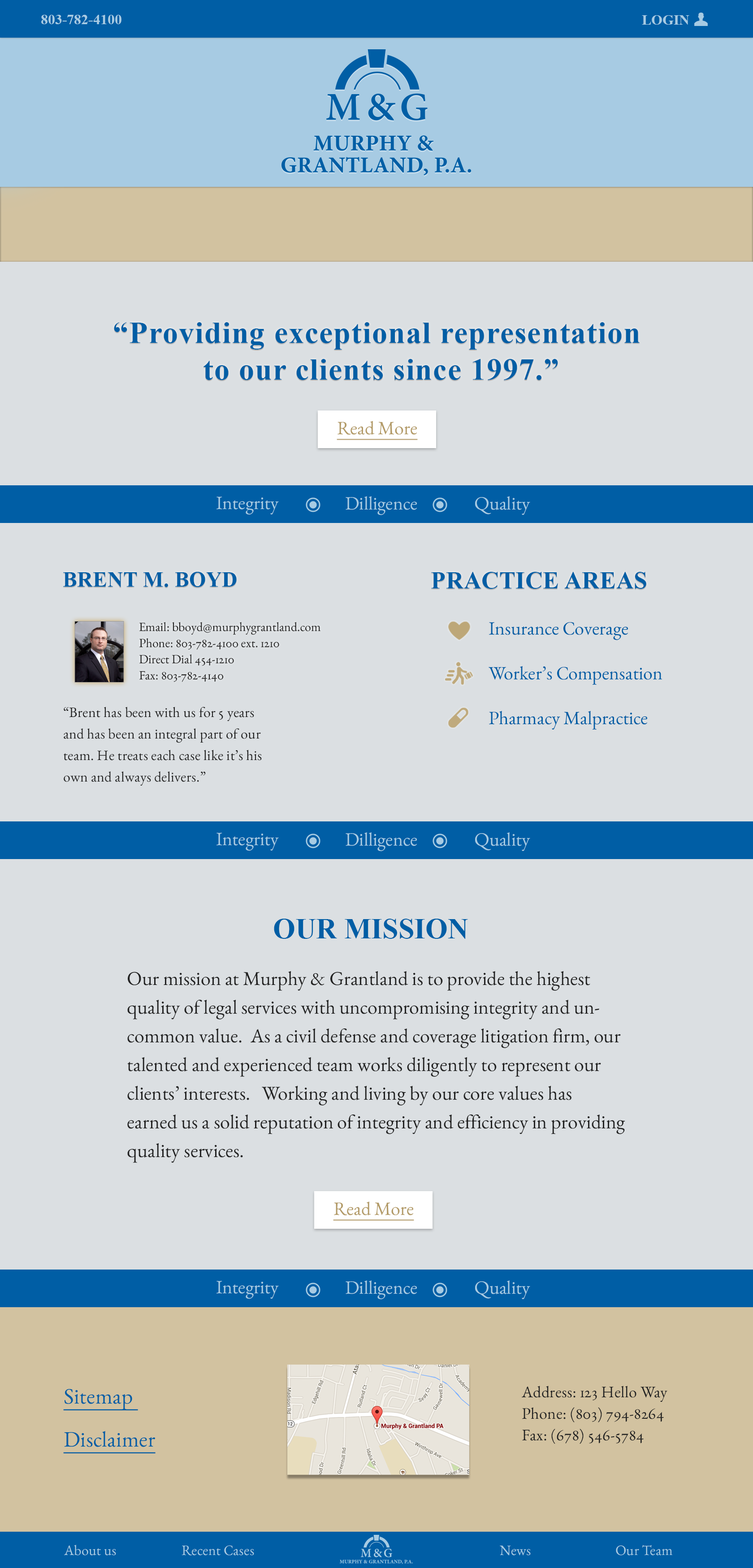
<style>
.page{position:relative;width:753px;height:1568px;background:#dbdfe2}
.page>*{position:absolute;margin:0}
.t1{font:14.3px "TimesNewRomanPS-BoldMT";color:#a7cbe3}
.t2{font:30.5px "TimesNewRomanPS-BoldMT";letter-spacing:0.03em;color:#005ea5}
.t3{font:18.8px "EBGaramond";color:#b39b68;text-decoration:underline}
.t4{font:18.8px "EBGaramond";color:#a7cbe3}
.t5{font:21.5px "TimesNewRomanPS-BoldMT";letter-spacing:0.01em;color:#005ea5}
.t6{font:24.2px "TimesNewRomanPS-BoldMT";letter-spacing:0.01em;color:#005ea5}
.t7{font:12.5px/16.1px "EBGaramond";color:#222222}
.t8{font:18.8px "EBGaramond";color:#005ea5}
.t9{font:14.3px/21.5px "EBGaramond";letter-spacing:0.01em;color:#222222}
.t10{font:28.7px "TimesNewRomanPS-BoldMT";color:#005ea5}
.t11{font:19.7px/28.7px "EBGaramond";color:#222222}
.t12{font:16.1px/21.5px "EBGaramond";letter-spacing:0.01em;color:#222222}
.t13{font:22px/21.5px "EBGaramond";letter-spacing:0.01em;color:#005ea5;text-decoration:underline}
.t14{font:14.3px "EBGaramond";letter-spacing:0.01em;color:#a7cbe3}
</style>
<div class="page">
<p class="t1" style="left:41px;top:15px;width:80px;height:9px">803-782-4100</p>
<p class="t1" style="left:642px;top:15px;width:47px;height:10px">LOGIN</p>
<p class="t2" style="left:114px;top:322px;width:525px;height:58px;text-align:center">“Providing exceptional representation <br>to our clients since 1997.”</p>
<p class="t3" style="left:337px;top:421px;width:81px;height:19px">Read More</p>
<p class="t4" style="left:216px;top:497px;width:63px;height:18px">Integrity</p>
<p class="t4" style="left:346px;top:496px;width:71px;height:19px">Dilligence</p>
<p class="t4" style="left:475px;top:496px;width:55px;height:19px">Quality</p>
<p class="t5" style="left:63px;top:572px;width:174px;height:15px">BRENT M. BOYD</p>
<p class="t6" style="left:431px;top:572px;width:215px;height:17px">PRACTICE AREAS</p>
<p class="t7" style="left:139px;top:622px;width:182px;height:60px">Email: bboyd@murphygrantland.com <br>Phone: 803-782-4100 ext. 1210<br>Direct Dial 454-1210<br>Fax: 803-782-4140</p>
<p class="t8" style="left:488px;top:622px;width:140px;height:18px">Insurance Coverage</p>
<p class="t8" style="left:488px;top:666px;width:174px;height:19px">Worker’s Compensation</p>
<p class="t9" style="left:64px;top:707px;width:198px;height:79px">“Brent has been with us for 5 years<br>and has been an integral part of our <br>team. He treats each case like it’s his<br>own and always delivers.”</p>
<p class="t8" style="left:489px;top:711px;width:158px;height:19px">Pharmacy Malpractice</p>
<p class="t4" style="left:216px;top:833px;width:63px;height:18px">Integrity</p>
<p class="t4" style="left:346px;top:832px;width:71px;height:19px">Dilligence</p>
<p class="t4" style="left:475px;top:832px;width:55px;height:19px">Quality</p>
<p class="t10" style="left:274px;top:919px;width:194px;height:20px">OUR MISSION</p>
<p class="t11" style="left:127px;top:971px;width:498px;height:192px">Our mission at Murphy &amp; Grantland is to provide the highest quality of legal services with uncompromising integrity and uncommon value.  As a civil defense and coverage litigation firm, our talented and experienced team works diligently to represent our clients’ interests.   Working and living by our core values has earned us a solid reputation of integrity and efficiency in providing quality services.</p>
<p class="t3" style="left:333px;top:1201px;width:81px;height:20px">Read More</p>
<p class="t4" style="left:216px;top:1281px;width:63px;height:18px">Integrity</p>
<p class="t4" style="left:346px;top:1280px;width:71px;height:20px">Dilligence</p>
<p class="t4" style="left:475px;top:1280px;width:55px;height:19px">Quality</p>
<p class="t12" style="left:522px;top:1386px;width:145px;height:58px">Address: 123 Hello Way<br>Phone: (803) 794-8264<br>Fax: (678) 546-5784</p>
<p class="t13" style="left:63px;top:1389px;width:93px;height:65px">Sitemap <br><br>Disclaimer</p>
<p class="t14" style="left:64px;top:1545px;width:52px;height:10px">About us</p>
<p class="t14" style="left:181px;top:1545px;width:73px;height:10px">Recent Cases</p>
<p class="t14" style="left:500px;top:1546px;width:31px;height:9px">News</p>
<p class="t14" style="left:616px;top:1545px;width:57px;height:10px">Our Team</p>
</div>
